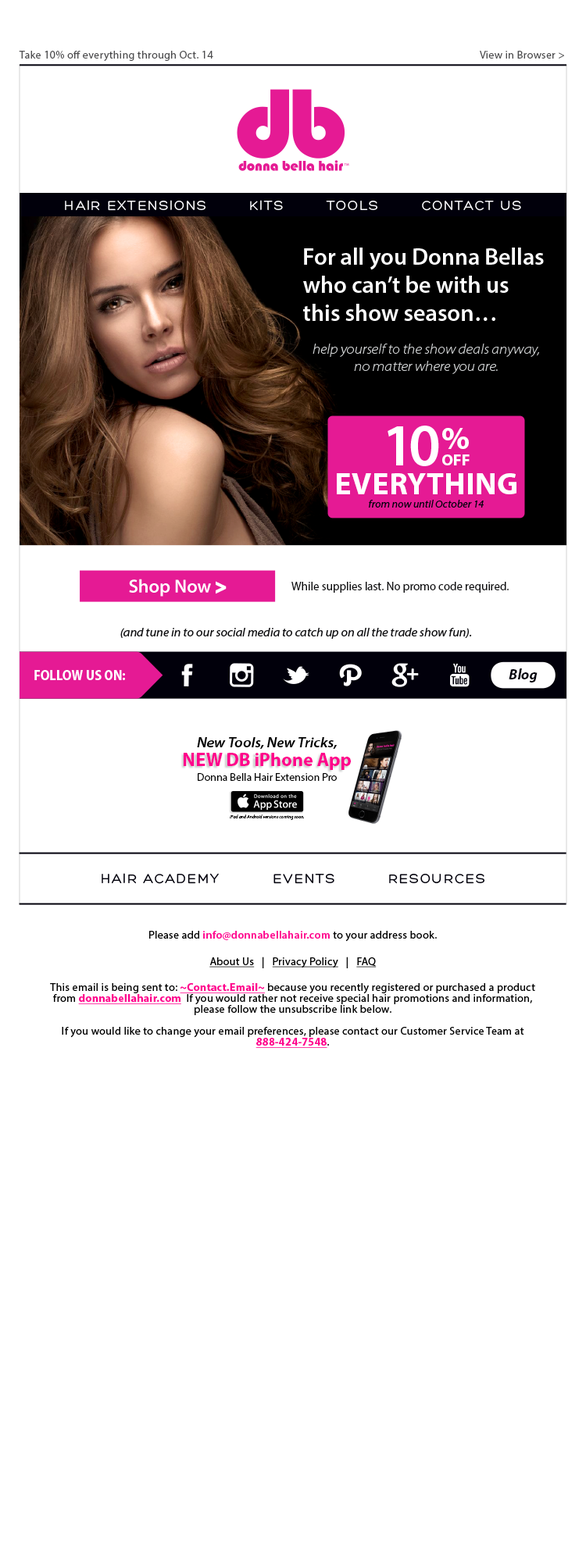
<style>
.page{position:relative;width:586px;height:1568px;background:#ffffff}
.page>*{position:absolute;margin:0}
.t1{font:10.9px "MyriadPro-Regular";letter-spacing:0.025em;color:#4d4d4f}
.t2{font:14.1px "Hero";letter-spacing:0.1em;color:#ffffff}
.t3{font:23.4px "MyriadPro-Semibold";color:#ffffff}
.t4{font:14.1px "MyriadPro-LightSemiExtIt";color:#d1d3d4}
.t5{font:59.5px "MyriadPro-Semibold";letter-spacing:-0.05em;color:#ffffff}
.t6{font:16.1px/16.1px "MyriadPro-Bold";color:#ffffff}
.t7{font:32.2px/16.1px "MyriadPro-Bold";color:#ffffff}
.t8{font:31.2px "MyriadPro-Bold";letter-spacing:0.01em;color:#ffffff}
.t9{font:10.2px "MyriadPro-SemiExtIt";color:#01000b}
.t10{font:11.7px "MyriadPro-Regular";color:#0d0d0f}
.t11{font:11.7px "MyriadPro-SemiExtIt";color:#0d0d0f}
.t12{font:14px "MyriadPro-BoldSemiCn";color:#ffffff}
.t13{font:14.6px "MyriadPro-BoldIt";color:#01000b}
.t14{font:14.1px "MyriadPro-SemiboldSemiExtIt";color:#000000}
.t15{font:18.7px "MyriadPro-Bold";color:#ff008c}
.t16{font:10.9px "MyriadPro-Regular";color:#000000}
.t17{font:4.7px "MyriadPro-It";color:#000000}
.t18{font:14.1px "Hero";letter-spacing:0.1em;color:#01000b}
.t19{font:10.9px/10.9px "MyriadPro-Regular";letter-spacing:0.025em;color:#000000}
.t20{font:10.9px "MyriadPro-Regular";letter-spacing:0.025em;color:#000000}
.t21{font:10.9px "MyriadPro-Semibold";letter-spacing:0.025em;color:#ff008c}
.t22{font:10.9px "MyriadPro-Regular";letter-spacing:0.025em;color:#000000;text-decoration:underline}
.t23{font:10.9px "MyriadPro-Bold";letter-spacing:0.025em;color:#ff008c;text-decoration:underline}
.t24{font:10.9px/10.9px "MyriadPro-Bold";letter-spacing:0.025em;color:#ff008c;text-decoration:underline}
</style>
<div class="page">
<p class="t1" style="left:19px;top:51px;width:545px;height:10px">Take 10% off everything through Oct. 14              View in Browser &gt;</p>
<p class="t2" style="left:65px;top:200px;width:456px;height:11px">HAIR EXTENSIONS        KITS        TOOLS        CONTACT US</p>
<p class="t3" style="left:303px;top:248px;width:240px;height:73px">For all you Donna Bellas who can’t be with us this show season…</p>
<p class="t4" style="left:312px;top:344px;width:227px;height:30px;text-align:center">help yourself to the show deals anyway, no matter where you are.</p>
<p class="t5" style="left:387px;top:426px;width:52px;height:40px">10</p>
<p class="t6" style="left:442px;top:428px;width:27px;height:37px"><span class="t7">%<br></span>OFF</p>
<p class="t8" style="left:337px;top:473px;width:179px;height:21px">EVERYTHING</p>
<p class="t9" style="left:369px;top:500px;width:114px;height:8px">from now until October 14</p>
<p class="t10" style="left:291px;top:582px;width:217px;height:11px">While supplies last. No promo code required.</p>
<p class="t11" style="left:120px;top:628px;width:352px;height:11px">(and tune in to our social media to catch up on all the trade show fun).</p>
<p class="t12" style="left:34px;top:670px;width:91px;height:10px">FOLLOW US ON:</p>
<p class="t13" style="left:508px;top:668px;width:29px;height:14px">Blog</p>
<p class="t14" style="left:197px;top:737px;width:140px;height:12px">New Tools, New Tricks,</p>
<p class="t15" style="left:184px;top:753px;width:167px;height:17px">NEW DB iPhone App</p>
<p class="t16" style="left:198px;top:773px;width:139px;height:8px">Donna Bella Hair Extension Pro</p>
<p class="t17" style="left:230px;top:814px;width:74px;height:6px">iPad and Android versions coming soon.</p>
<p class="t18" style="left:102px;top:873px;width:382px;height:11px">HAIR ACADEMY          EVENTS          RESOURCES</p>
<p class="t19" style="left:50px;top:931px;width:485px;height:117px;text-align:center"><span class="t20">Please add </span><span class="t21">info@donnabellahair.com</span><span class="t20"> to your address book.<br><br></span><span class="t22">About Us</span><span class="t20">   |   </span><span class="t22">Privacy Policy</span><span class="t20">   |   </span><span class="t22">FAQ<br></span><span class="t20"><br>This email is being sent to: </span><span class="t23">~Contact.Email~</span><span class="t20"> because you recently registered </span>or purchased a product from <span class="t24">donnabellahair.com</span>  If you would rather not receive special hair promotions and information, please follow the unsubscribe link below.<br><br>If you would like to change your email preferences, please contact our Customer Service Team at <span class="t24">888-424-7548</span>.</p>
</div>
